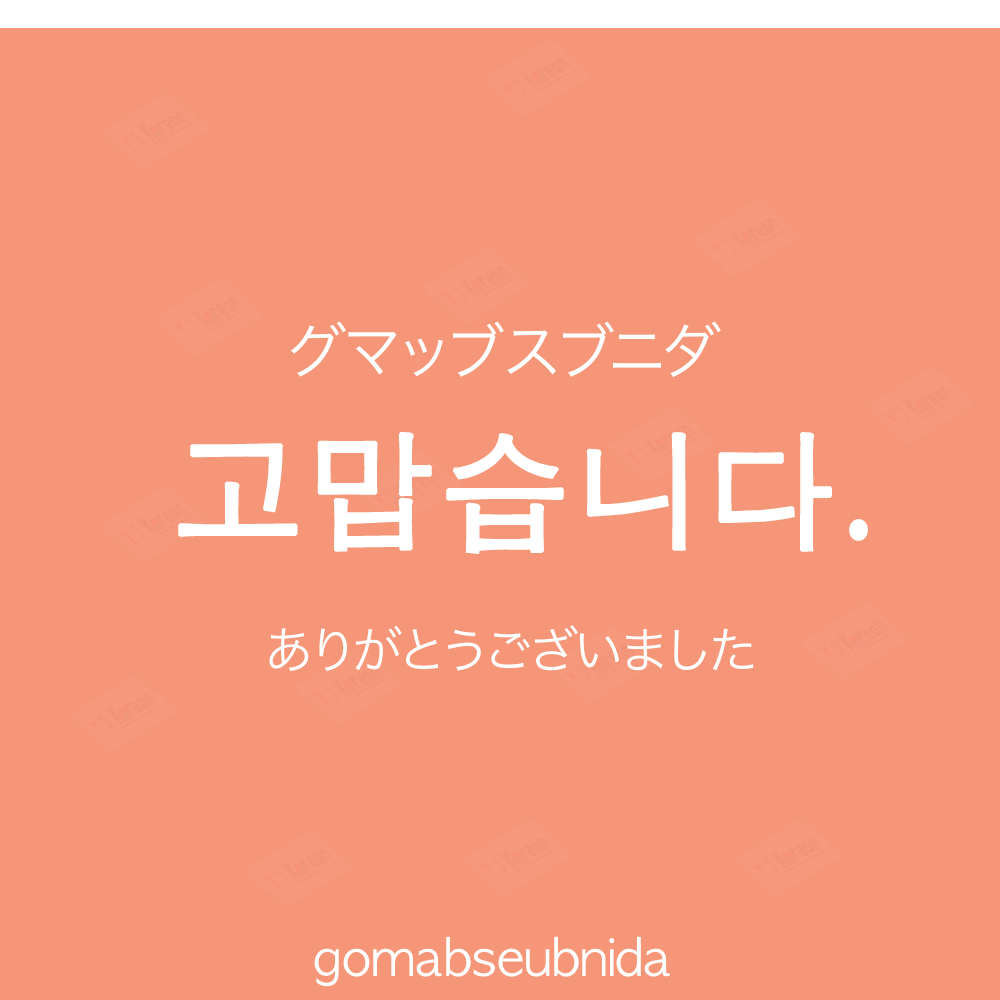
<style>
.page{position:relative;width:1000px;height:1000px;background:#f69679}
.page>*{position:absolute;margin:0}
.t1{font:60px "HiraKakuProN-W3";color:#ffffff;text-transform:uppercase}
.t2{font:130px "AppleGothic";color:#ffffff;font-weight:bold}
.t3{font:50px "HiraKakuProN-W3";color:#ffffff}
.t4{font:50px "AppleGothic";color:#ffffff}
</style>
<div class="page">
<p class="t1" style="left:290px;top:321px;width:431px;height:56px">グマッブスブニダ</p>
<p class="t2" style="left:178px;top:432px;width:690px;height:122px">고맙습니다.</p>
<p class="t3" style="left:269px;top:625px;width:485px;height:46px">ありがとうございました</p>
<p class="t4" style="left:314px;top:936px;width:356px;height:51px">gomabseubnida</p>
</div>
